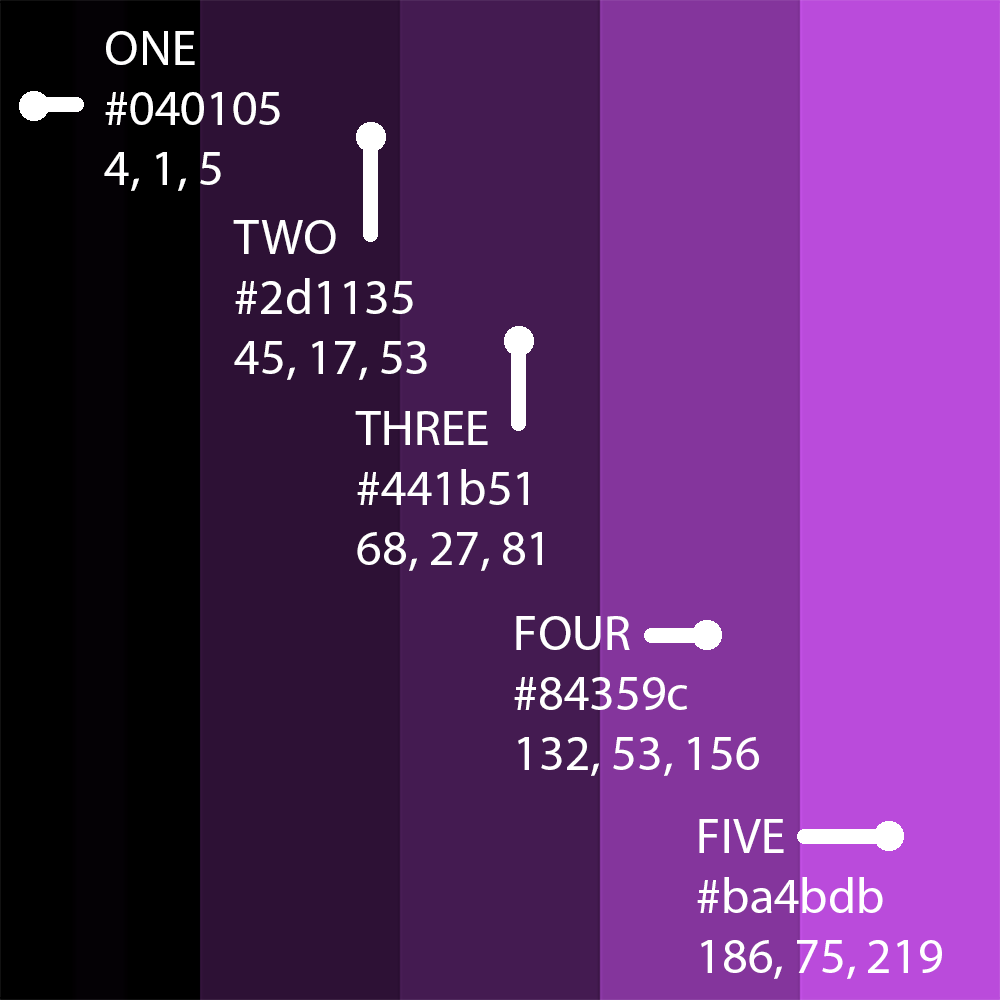
<style>
.page{position:relative;width:1000px;height:1000px}
.page>*{position:absolute;margin:0}
.t1{font:12px "MyriadPro-Regular";color:#ffffff}
</style>
<div class="page">
<p class="t1" style="left:104px;top:31px;width:176px;height:160px">ONE <br>#040105<br>4, 1, 5</p>
<p class="t1" style="left:233px;top:220px;width:194px;height:160px">TWO<br>#2d1135<br>45, 17, 53</p>
<p class="t1" style="left:355px;top:411px;width:187px;height:160px">THREE<br>#441b51<br>68, 27, 81</p>
<p class="t1" style="left:514px;top:616px;width:245px;height:160px">FOUR<br>#84359c<br>132, 53, 156</p>
<p class="t1" style="left:697px;top:819px;width:245px;height:160px">FIVE<br>#ba4bdb<br>186, 75, 219</p>
</div>
